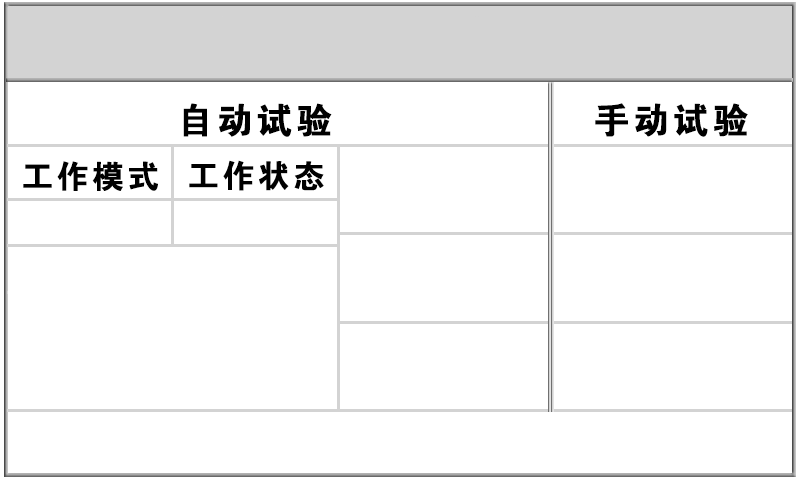
<style>
.page{position:relative;width:800px;height:480px;background:#ffffff}
.page>*{position:absolute;margin:0}
.t1{font:36px "FZDHTJW--GB1-0";letter-spacing:0.1em;color:#000000}
.t2{font:32px "FZDHTJW--GB1-0";letter-spacing:0.1em;color:#000000}
</style>
<div class="page">
<p class="t1" style="left:183px;top:103px;width:149px;height:34px">自动试验</p>
<p class="t1" style="left:595px;top:103px;width:153px;height:34px">手动试验</p>
<p class="t2" style="left:23px;top:161px;width:135px;height:30px">工作模式</p>
<p class="t2" style="left:189px;top:160px;width:135px;height:31px">工作状态</p>
</div>
